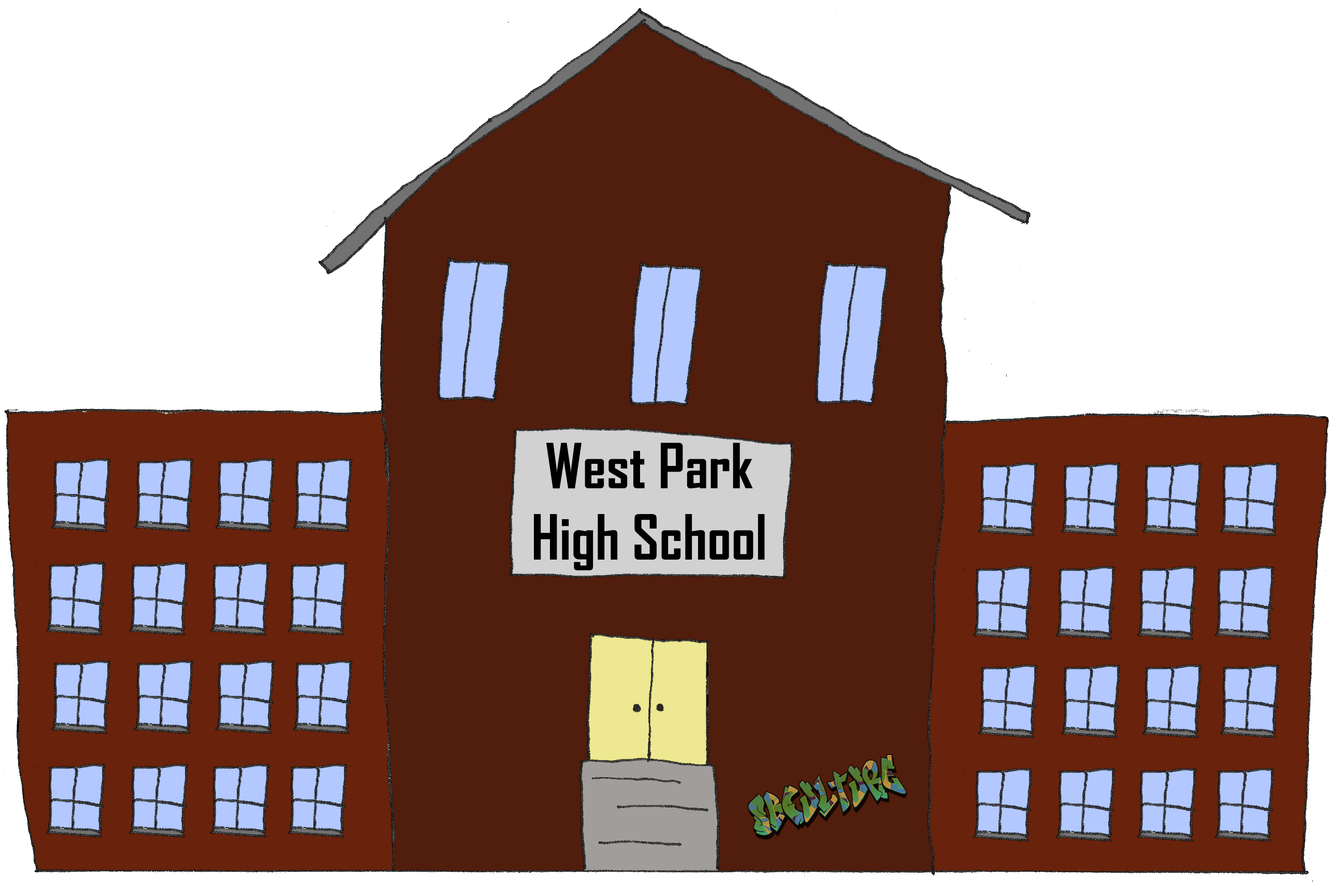
<style>
.page{position:relative;width:1335px;height:893px;background:#ffffff}
.page>*{position:absolute;margin:0}
.t1{font:59.5px "AgencyFB-Bold";color:#000000}
</style>
<div class="page">
<p class="t1" style="left:534px;top:443px;width:231px;height:128px;text-align:center">West Park<br>High School</p>
</div>
